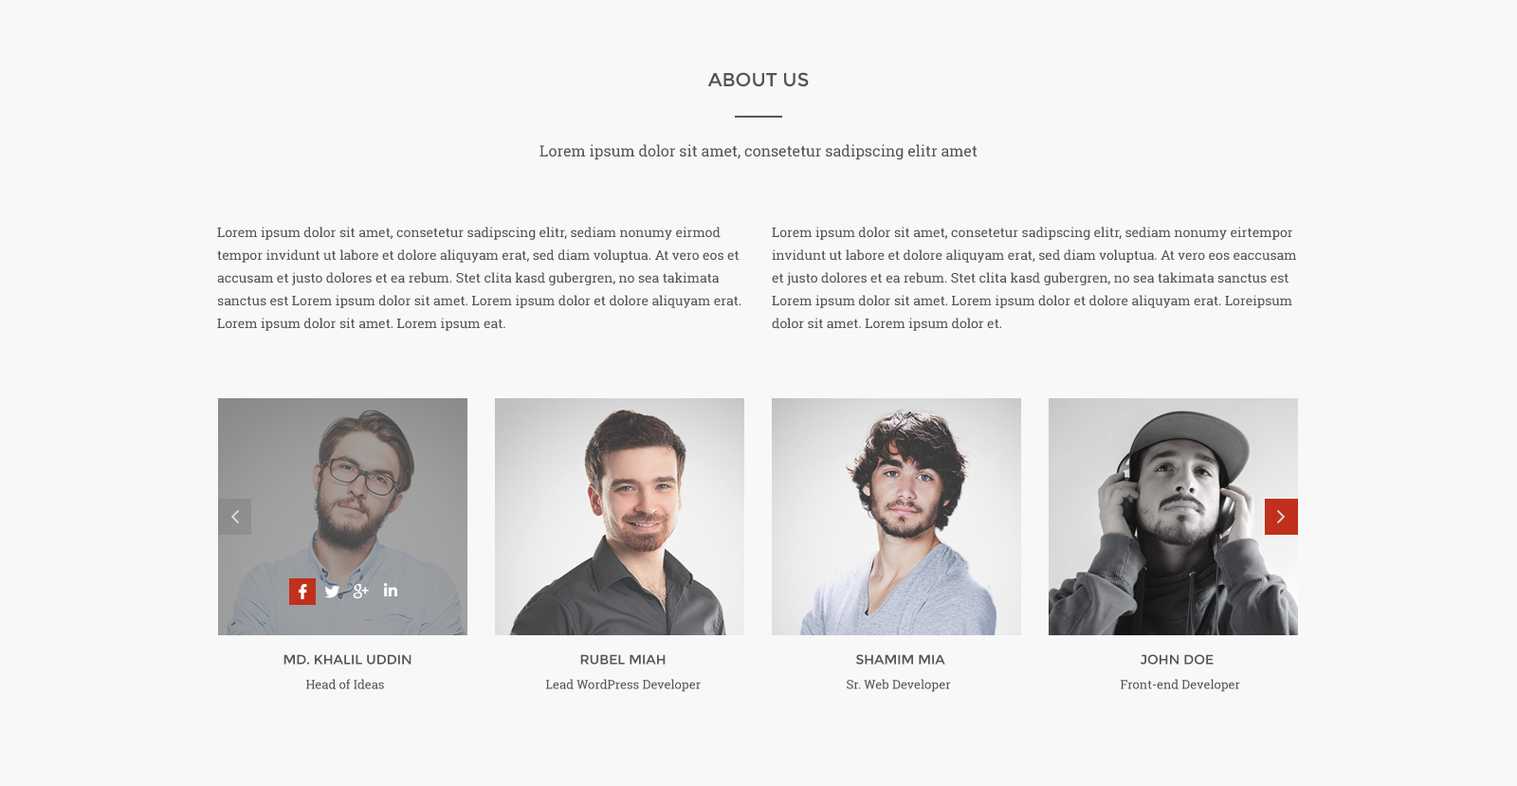
<style>
.page{position:relative;width:1517px;height:786px;background:#f8f8f8}
.page>*{position:absolute;margin:0}
.t1{font:19px "Montserrat-Regular";color:#555555;text-transform:uppercase}
.t2{font:15.2px "RobotoSlab-Regular";color:#555555}
.t3{font:13.3px/22.8px "RobotoSlab-Regular";color:#555555}
.t4{font:13.3px "Montserrat-Regular";color:#555555;text-transform:uppercase}
.t5{font:12.3px "RobotoSlab-Regular";color:#555555}
</style>
<div class="page">
<p class="t1" style="left:707px;top:72px;width:102px;height:15px">About us</p>
<p class="t2" style="left:540px;top:144px;width:438px;height:16px">Lorem ipsum dolor sit amet, consetetur sadipscing elitr amet</p>
<p class="t3" style="left:217px;top:227px;width:524px;height:104px">Lorem ipsum dolor sit amet, consetetur sadipscing elitr, sediam nonumy eirmod tempor invidunt ut labore et dolore aliquyam erat, sed diam voluptua. At vero eos et accusam et justo dolores et ea rebum. Stet clita kasd gubergren, no sea takimata sanctus est Lorem ipsum dolor sit amet. Lorem ipsum dolor et dolore aliquyam erat. Lorem ipsum dolor sit amet. Lorem ipsum eat.</p>
<p class="t3" style="left:772px;top:227px;width:524px;height:104px">Lorem ipsum dolor sit amet, consetetur sadipscing elitr, sediam nonumy eirtempor invidunt ut labore et dolore aliquyam erat, sed diam voluptua. At vero eos eaccusam et justo dolores et ea rebum. Stet clita kasd gubergren, no sea takimata sanctus est Lorem ipsum dolor sit amet. Lorem ipsum dolor et dolore aliquyam erat. Loreipsum dolor sit amet. Lorem ipsum dolor et.</p>
<p class="t4" style="left:283px;top:654px;width:128px;height:11px">Md. Khalil Uddin</p>
<p class="t4" style="left:580px;top:654px;width:86px;height:11px">Rubel Miah</p>
<p class="t4" style="left:856px;top:654px;width:89px;height:11px">Shamim Mia</p>
<p class="t4" style="left:1141px;top:654px;width:73px;height:11px">John Doe</p>
<p class="t5" style="left:306px;top:679px;width:78px;height:10px">Head of Ideas</p>
<p class="t5" style="left:546px;top:679px;width:155px;height:13px">Lead WordPress Developer</p>
<p class="t5" style="left:847px;top:679px;width:104px;height:13px">Sr. Web Developer</p>
<p class="t5" style="left:1121px;top:679px;width:119px;height:13px">Front-end Developer</p>
</div>
